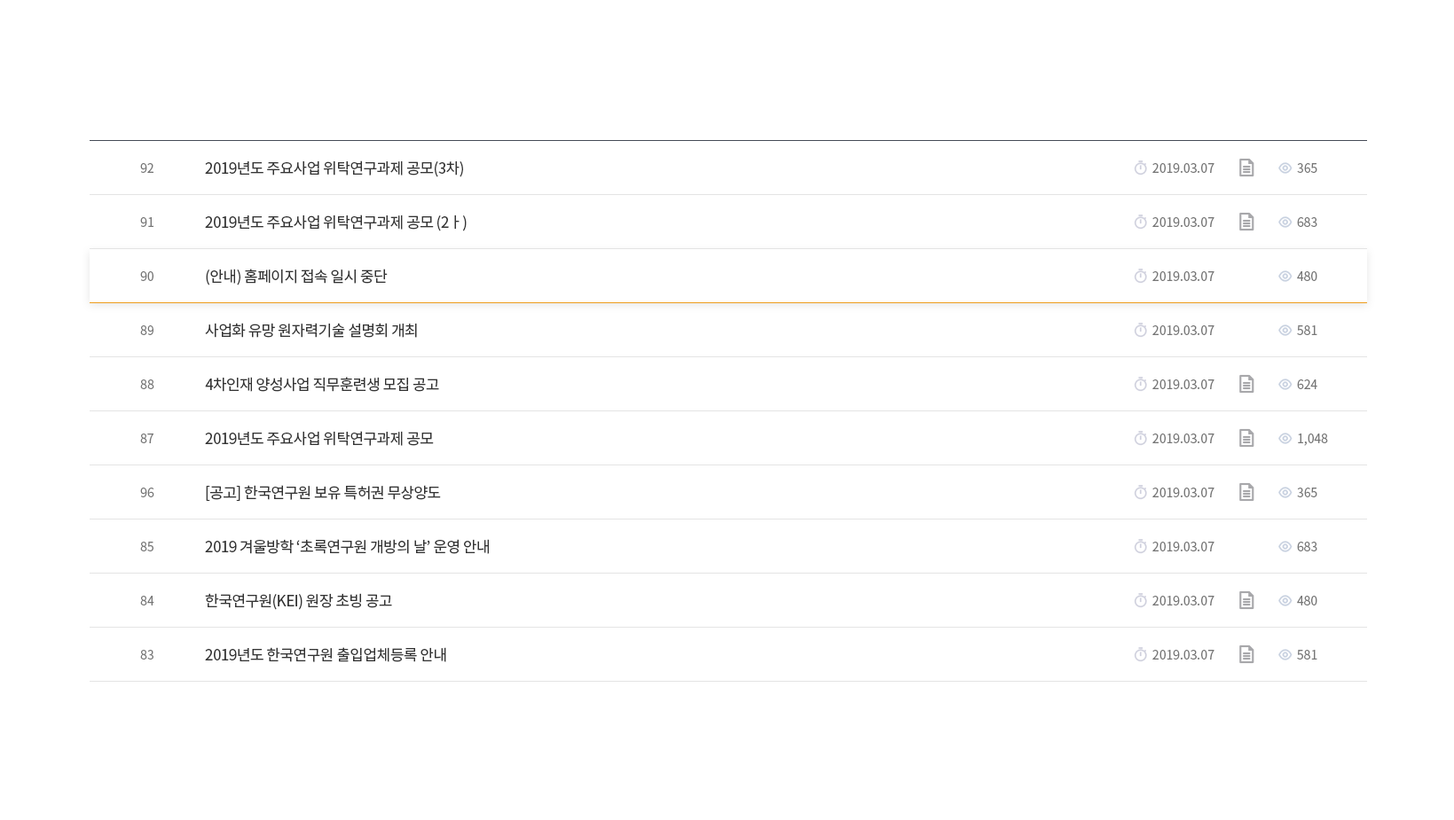
<style>
.page{position:relative;width:1454px;height:820px;background:#ffffff}
.page>*{position:absolute;margin:0}
.t1{font:15.1px/54.1px "NotoSansKR-Regular";letter-spacing:-0.03em;color:#333333;text-transform:uppercase}
.t2{font:12.4px/54.1px "NotoSansKR-Regular";color:#767676;text-transform:uppercase}
</style>
<div class="page">
<p class="t1" style="left:205px;top:161px;width:284px;height:501px">2019년도 주요사업 위탁연구과제 공모(3차)<br>2019년도 주요사업 위탁연구과제 공모 (2ㅏ)<br>(안내) 홈페이지 접속 일시 중단<br>사업화 유망 원자력기술 설명회 개최<br>4차인재 양성사업 직무훈련생 모집 공고<br>2019년도 주요사업 위탁연구과제 공모<br>[공고] 한국연구원 보유 특허권 무상양도<br>2019 겨울방학 ‘초록연구원 개방의 날’ 운영 안내<br>한국연구원(KEI) 원장 초빙 공고<br>2019년도 한국연구원 출입업체등록 안내</p>
<p class="t2" style="left:140px;top:163px;width:14px;height:497px;text-align:center">92<br>91<br>90<br>89<br>88<br>87<br>96<br>85<br>84<br>83</p>
<p class="t2" style="left:1152px;top:163px;width:62px;height:497px;text-align:center">2019.03.07<br>2019.03.07<br>2019.03.07<br>2019.03.07<br>2019.03.07<br>2019.03.07<br>2019.03.07<br>2019.03.07<br>2019.03.07<br>2019.03.07</p>
<p class="t2" style="left:1297px;top:163px;width:31px;height:497px">365<br>683<br>480<br>581<br>624<br>1,048<br>365<br>683<br>480<br>581</p>
</div>
